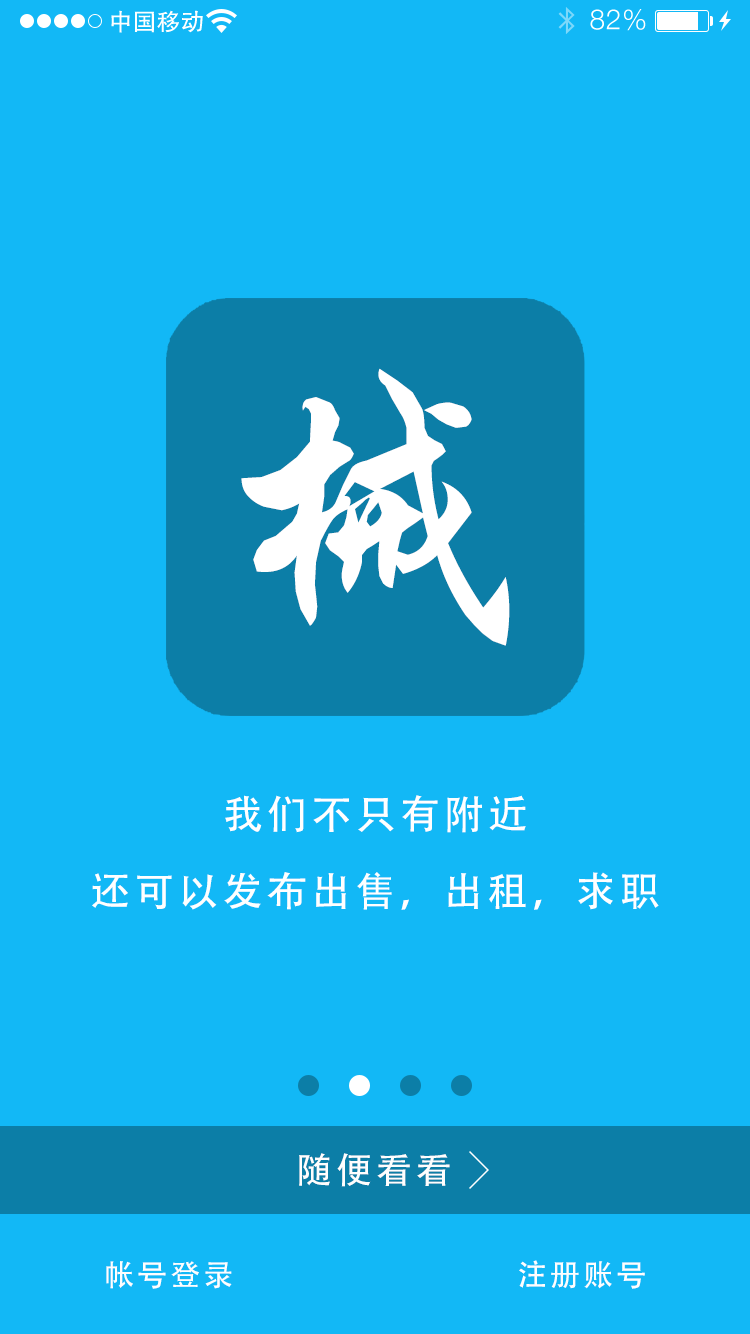
<style>
.page{position:relative;width:750px;height:1334px;background:#12b8f6}
.page>*{position:absolute;margin:0}
.t1{font:301.3px "RS_XingKai";letter-spacing:0.104em;color:#ffffff}
.t2{font:40px "AdobeHeitiStd-Regular";letter-spacing:0.104em;color:#ffffff}
.t3{font:40px "AdobeHeitiStd-Regular";letter-spacing:0.104em;color:#feffff}
.t4{font:36px "AdobeHeitiStd-Regular";letter-spacing:0.104em;color:#fefefe}
.t5{font:30px "AdobeHeitiStd-Regular";letter-spacing:0.104em;color:#fefefe}
</style>
<div class="page">
<p class="t1" style="left:241px;top:368px;width:269px;height:278px">械</p>
<p class="t2" style="left:225px;top:795px;width:301px;height:38px">我们不只有附近</p>
<p class="t3" style="left:92px;top:872px;width:567px;height:38px">还可以发布出售，出租，求职</p>
<p class="t4" style="left:299px;top:1153px;width:151px;height:34px">随便看看</p>
<p class="t5" style="left:106px;top:1261px;width:126px;height:28px">帐号登录</p>
<p class="t5" style="left:519px;top:1260px;width:126px;height:29px">注册账号</p>
</div>
